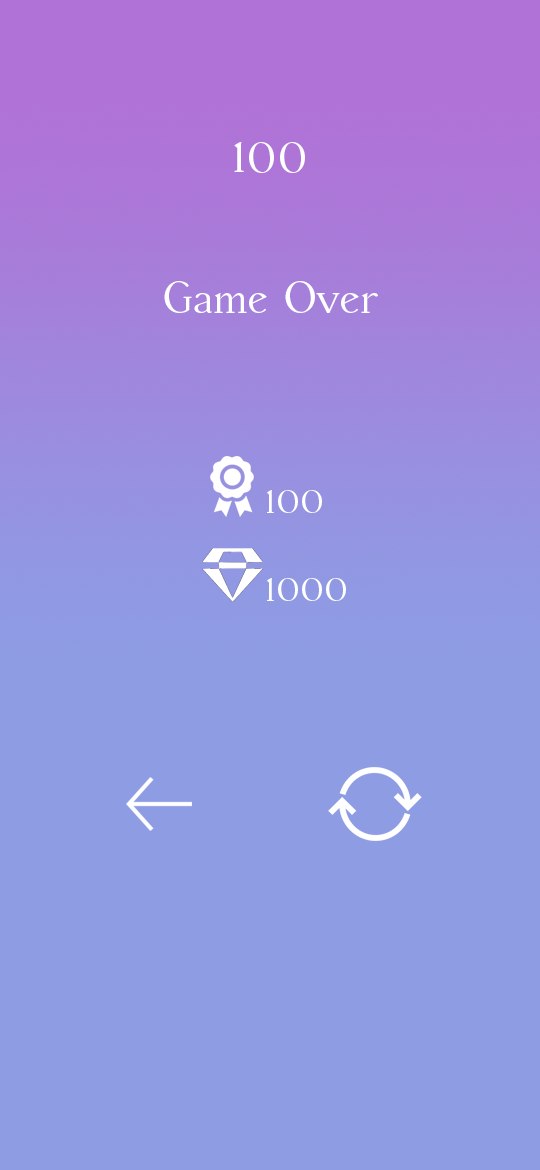
<style>
.page{position:relative;width:540px;height:1170px;background:#8e9ce4}
.page>*{position:absolute;margin:0}
.t1{font:50px "AccanthisADFStdNo2-Regular";color:#ffffff}
.t2{font:45px "AccanthisADFStdNo2-Regular";color:#ffffff}
.t3{font:38px "AccanthisADFStdNo2-Regular";color:#ffffff}
</style>
<div class="page">
<p class="t1" style="left:234px;top:142px;width:71px;height:31px">100</p>
<p class="t2" style="left:164px;top:281px;width:214px;height:32px">Game Over</p>
<p class="t3" style="left:266px;top:490px;width:56px;height:23px">100</p>
<p class="t3" style="left:266px;top:578px;width:80px;height:23px">1000</p>
</div>
